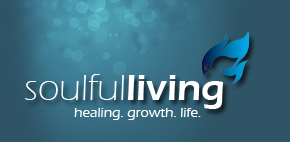
<style>
.page{position:relative;width:290px;height:142px;background:#2e5466}
.page>*{position:absolute;margin:0}
.t1{font:38px "ErasITC-Light";color:#ffffff}
.t2{font:38px "ErasITC-Demi";color:#ffffff}
.t3{font:14px "ErasITC-Medium";color:#ffffff}
</style>
<div class="page">
<p class="t1" style="left:24px;top:74px;width:200px;height:35px">soulful<span class="t2">living</span></p>
<p class="t3" style="left:74px;top:108px;width:127px;height:12px">healing. growth. life.</p>
</div>
